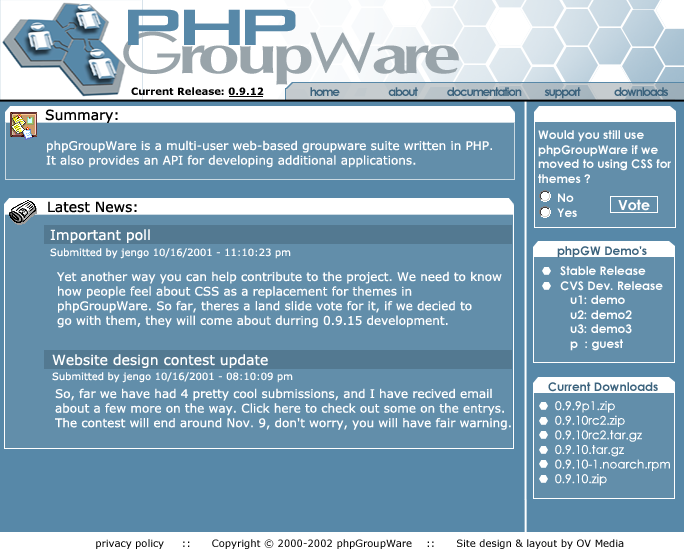
<style>
.page{position:relative;width:684px;height:550px;background:#628eaa}
.page>*{position:absolute;margin:0}
.t1{font:68.5px "BankGothicBT-Medium";letter-spacing:-0.2em;color:#5788a8;scale:1.32 1}
.t2{font:68.5px "BankGothicBT-Medium";letter-spacing:-0.13em;color:#5788a8;scale:1.32 1}
.t3{font:56.5px "CGOmega-Bold";letter-spacing:-0.1em;color:#99a4aa;scale:1.32 1}
.t4{font:56.5px "CenturyGothic";letter-spacing:-0.1em;color:#99a4aa;scale:1.32 1}
.t5{font:56.5px "CGOmega-Bold";letter-spacing:-0.05em;color:#99a4aa;scale:1.32 1}
.t6{font:10px "Verdana-Bold";color:#000000}
.t7{font:12px "CenturyGothic-Bold";letter-spacing:-0.1em;color:#3c637d}
.t8{font:14px "Verdana";color:#000000}
.t9{font:12px/14.6px "CenturyGothic-Bold";color:#ffffff}
.t10{font:12px/14.6px "Verdana";color:#ffffff}
.t11{font:14px "CenturyGothic-Bold";color:#ffffff}
.t12{font:14px "Verdana";color:#ffffff}
.t13{font:12px "CenturyGothic-Bold";color:#3c637d}
.t14{font:10px "Verdana";color:#ffffff}
.t15{font:12px/14.6px "CenturyGothic";color:#ffffff}
.t16{font:10px "Verdana";color:#000000}
</style>
<div class="page">
<p class="t1" style="left:128px;top:9px;width:168px;height:36px"><span class="t2">P</span>HP</p>
<p class="t3" style="left:123px;top:31px;width:336px;height:54px"><span class="t4">G</span>r<span class="t5">ou</span>p<span class="t4">W</span>are</p>
<p class="t6" style="left:131px;top:87px;width:133px;height:8px">Current Release: 0.9.12</p>
<p class="t7" style="left:310px;top:87px;width:358px;height:12px">home                       about              documentation           support                downloads</p>
<p class="t8" style="left:45px;top:109px;width:73px;height:14px">Summary:</p>
<p class="t9" style="left:538px;top:130px;width:133px;height:53px">Would you still use <br>phpGroupWare if we <br>moved to using CSS for<br>themes ?</p>
<p class="t10" style="left:46px;top:140px;width:446px;height:28px">phpGroupWare is a multi-user web-based groupware suite written in PHP. <br>It also provides an API for developing additional applications.</p>
<p class="t9" style="left:557px;top:193px;width:20px;height:24px">No<br>Yes</p>
<p class="t8" style="left:48px;top:201px;width:89px;height:12px">Latest News:</p>
<p class="t11" style="left:618px;top:199px;width:32px;height:12px">Vote</p>
<p class="t12" style="left:50px;top:229px;width:100px;height:14px">Important poll</p>
<p class="t13" style="left:557px;top:246px;width:90px;height:12px">phpGW Demo's</p>
<p class="t14" style="left:50px;top:248px;width:241px;height:11px">Submitted by jengo 10/16/2001 - 11:10:23 pm</p>
<p class="t9" style="left:560px;top:266px;width:103px;height:85px">Stable Release<br>CVS Dev. Release<br>   u1: demo<br>   u2: demo2<br>   u3: demo3<br>   p  : guest</p>
<p class="t10" style="left:57px;top:271px;width:445px;height:57px">Yet another way you can help contribute to the project. We need to know <br>how people feel about CSS as a replacement for themes in<br>phpGroupWare. So far, theres a land slide vote for it, if we decied to <br>go with them, they will come about durring 0.9.15 development.</p>
<p class="t12" style="left:52px;top:354px;width:216px;height:14px">Website design contest update</p>
<p class="t14" style="left:52px;top:372px;width:241px;height:11px">Submitted by jengo 10/16/2001 - 08:10:09 pm</p>
<p class="t10" style="left:55px;top:388px;width:456px;height:42px">So, far we have had 4 pretty cool submissions, and I have recived email <br>about a few more on the way. Click here to check out some on the entrys. <br>The contest will end around Nov. 9, don't worry, you will have fair warning.</p>
<p class="t13" style="left:548px;top:382px;width:110px;height:10px">Current Downloads</p>
<p class="t15" style="left:555px;top:401px;width:115px;height:85px">0.9.9p1.zip<br>0.9.10rc2.zip<br>0.9.10rc2.tar.gz<br>0.9.10.tar.gz<br>0.9.10-1.noarch.rpm<br>0.9.10.zip</p>
<p class="t16" style="left:96px;top:539px;width:528px;height:10px">privacy policy     ::      Copyright © 2000-2002 phpGroupWare    ::      Site design &amp; layout by OV Media</p>
</div>
